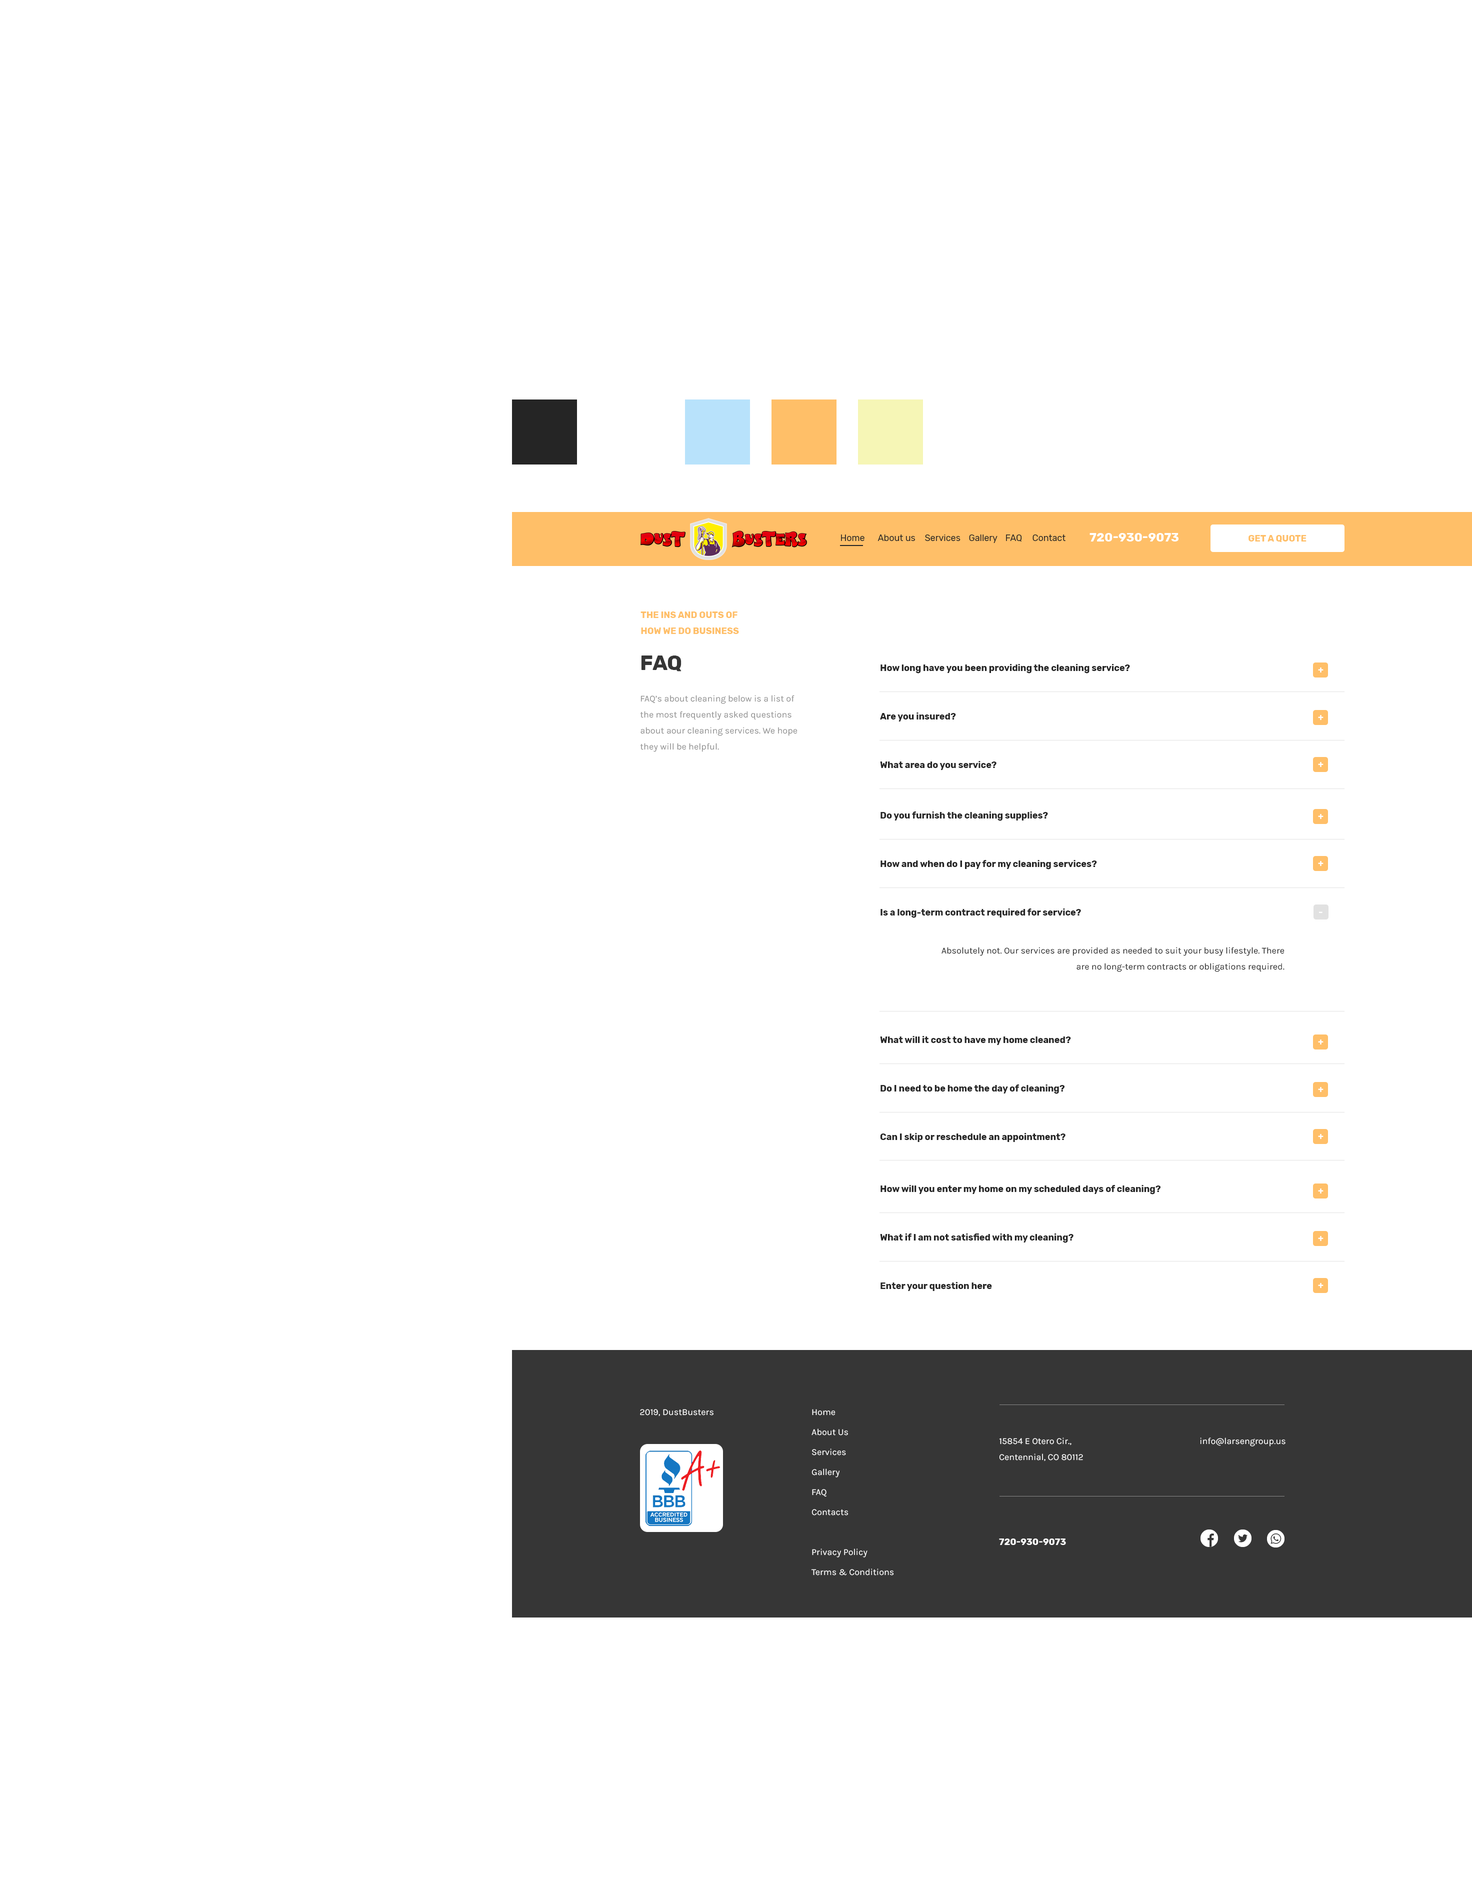
<style>
.page{position:relative;width:1472px;height:1900px;background:#ffffff}
.page>*{position:absolute;margin:0}
.t1{font:12px "Rubik-Bold";color:#ffffff;text-transform:uppercase}
.t2{font:9px "Rubik-Regular";color:#252525}
.t3{font:9px "Rubik-Bold";color:#ffbf68;text-transform:uppercase}
.t4{font:9px/16px "Rubik-Bold";color:#ffbf68;text-transform:uppercase}
.t5{font:21px "Rubik-Bold";color:#363636}
.t6{font:9px "Rubik-Bold";color:#252525}
.t7{font:9px "Rubik-Bold";color:#ffffff}
.t8{font:9px/16px "Karla-Regular";color:#909090}
.t9{font:9px/16px "Rubik-Bold";color:#252525}
.t10{font:9px/16px "Karla-Regular";color:#252525}
.t11{font:9px "Karla-Regular";color:#ffffff}
.t12{font:9px/20px "Karla-Regular";color:#ffffff}
.t13{font:9px/16.1px "Karla-Regular";color:#ffffff}
.t14{font:9px "Rubik-Bold";color:#ffffff;text-transform:uppercase}
</style>
<div class="page">
<p class="t1" style="left:1090px;top:533px;width:88px;height:9px">720-930-9073</p>
<p class="t2" style="left:841px;top:534px;width:23px;height:7px">Home</p>
<p class="t2" style="left:878px;top:534px;width:37px;height:7px">About us</p>
<p class="t2" style="left:925px;top:534px;width:35px;height:7px">Services</p>
<p class="t2" style="left:969px;top:534px;width:29px;height:9px">Gallery</p>
<p class="t2" style="left:1006px;top:534px;width:16px;height:8px">FAQ</p>
<p class="t2" style="left:1032px;top:534px;width:34px;height:7px">Contact</p>
<p class="t3" style="left:1248px;top:535px;width:58px;height:7px">Get a Quote</p>
<p class="t4" style="left:640px;top:612px;width:99px;height:22px">The Ins And Outs of <br>How We Do Business</p>
<p class="t5" style="left:641px;top:656px;width:41px;height:16px">FAQ</p>
<p class="t6" style="left:880px;top:664px;width:250px;height:10px">How long have you been providing the cleaning service?</p>
<p class="t7" style="left:1318px;top:668px;width:6px;height:4px">+</p>
<p class="t8" style="left:640px;top:695px;width:158px;height:57px">FAQ’s about cleaning below is a list of the most frequently asked questions about aour cleaning services. We hope they will be helpful.</p>
<p class="t6" style="left:880px;top:712px;width:76px;height:10px">Are you insured?</p>
<p class="t7" style="left:1318px;top:715px;width:6px;height:5px">+</p>
<p class="t9" style="left:880px;top:761px;width:116px;height:9px">What area do you service?<br>W</p>
<p class="t7" style="left:1318px;top:762px;width:6px;height:5px">+</p>
<p class="t9" style="left:880px;top:812px;width:168px;height:9px">Do you furnish the cleaning supplies?<br>Y</p>
<p class="t7" style="left:1318px;top:814px;width:6px;height:5px">+</p>
<p class="t9" style="left:880px;top:860px;width:217px;height:10px">How and when do I pay for my cleaning services?<br>W</p>
<p class="t7" style="left:1318px;top:861px;width:6px;height:5px">+</p>
<p class="t9" style="left:880px;top:908px;width:201px;height:10px">Is a long-term contract required for service?<br>A</p>
<p class="t7" style="left:1319px;top:912px;width:3px;height:1px">-</p>
<p class="t10" style="left:942px;top:947px;width:342px;height:25px;text-align:right">Absolutely not. Our services are provided as needed to suit your busy lifestyle. There are no long-term contracts or obligations required.</p>
<p class="t9" style="left:880px;top:1036px;width:191px;height:9px">What will it cost to have my home cleaned?<br>T</p>
<p class="t7" style="left:1318px;top:1040px;width:6px;height:4px">+</p>
<p class="t9" style="left:880px;top:1084px;width:185px;height:10px">Do I need to be home the day of cleaning?<br>S</p>
<p class="t7" style="left:1318px;top:1087px;width:6px;height:5px">+</p>
<p class="t9" style="left:880px;top:1133px;width:186px;height:9px">Can I skip or reschedule an appointment?<br>I</p>
<p class="t7" style="left:1318px;top:1134px;width:6px;height:5px">+</p>
<p class="t9" style="left:880px;top:1185px;width:281px;height:9px">How will you enter my home on my scheduled days of cleaning?<br>W</p>
<p class="t7" style="left:1318px;top:1188px;width:6px;height:6px">+</p>
<p class="t9" style="left:880px;top:1234px;width:194px;height:9px">What if I am not satisfied with my cleaning?<br>Y</p>
<p class="t7" style="left:1318px;top:1236px;width:6px;height:5px">+</p>
<p class="t9" style="left:880px;top:1282px;width:112px;height:9px">Enter your question here<br>E</p>
<p class="t7" style="left:1318px;top:1283px;width:6px;height:5px">+</p>
<p class="t11" style="left:640px;top:1409px;width:74px;height:7px">© 2019, DustBusters</p>
<p class="t12" style="left:811px;top:1409px;width:83px;height:167px">Home<br>About Us<br>Services<br>Gallery<br>FAQ<br>Contacts<br><br>Privacy Policy<br>Terms &amp; Conditions</p>
<p class="t13" style="left:999px;top:1438px;width:84px;height:23px">15854 E Otero Cir.,<br>Centennial, CO 80112</p>
<p class="t11" style="left:1200px;top:1438px;width:86px;height:8px">info@larsengroup.us</p>
<p class="t14" style="left:999px;top:1538px;width:67px;height:7px">720-930-9073</p>
</div>
